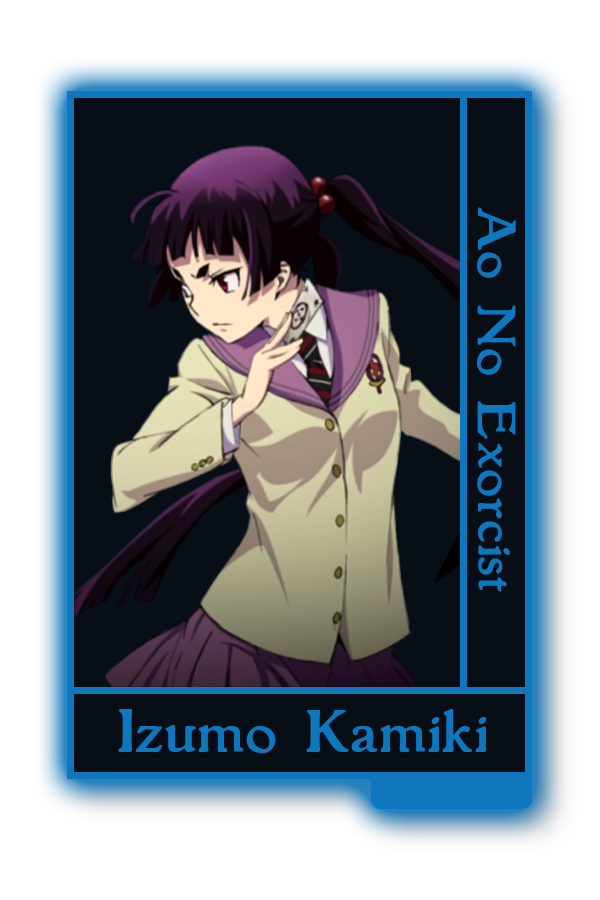
<style>
.page{position:relative;width:600px;height:900px;background:#070e16}
.page>*{position:absolute;margin:0}
.t1{font:48.8px "Grantham-Roman";color:#0f77be}
.t2{font:55.4px "Grantham-Roman";color:#0f77be}
</style>
<div class="page">
<p class="t1" style="left:477px;top:207px;width:39px;height:385px;rotate:90deg">Ao No Exorcist</p>
<p class="t2" style="left:118px;top:709px;width:369px;height:44px">Izumo Kamiki</p>
</div>
